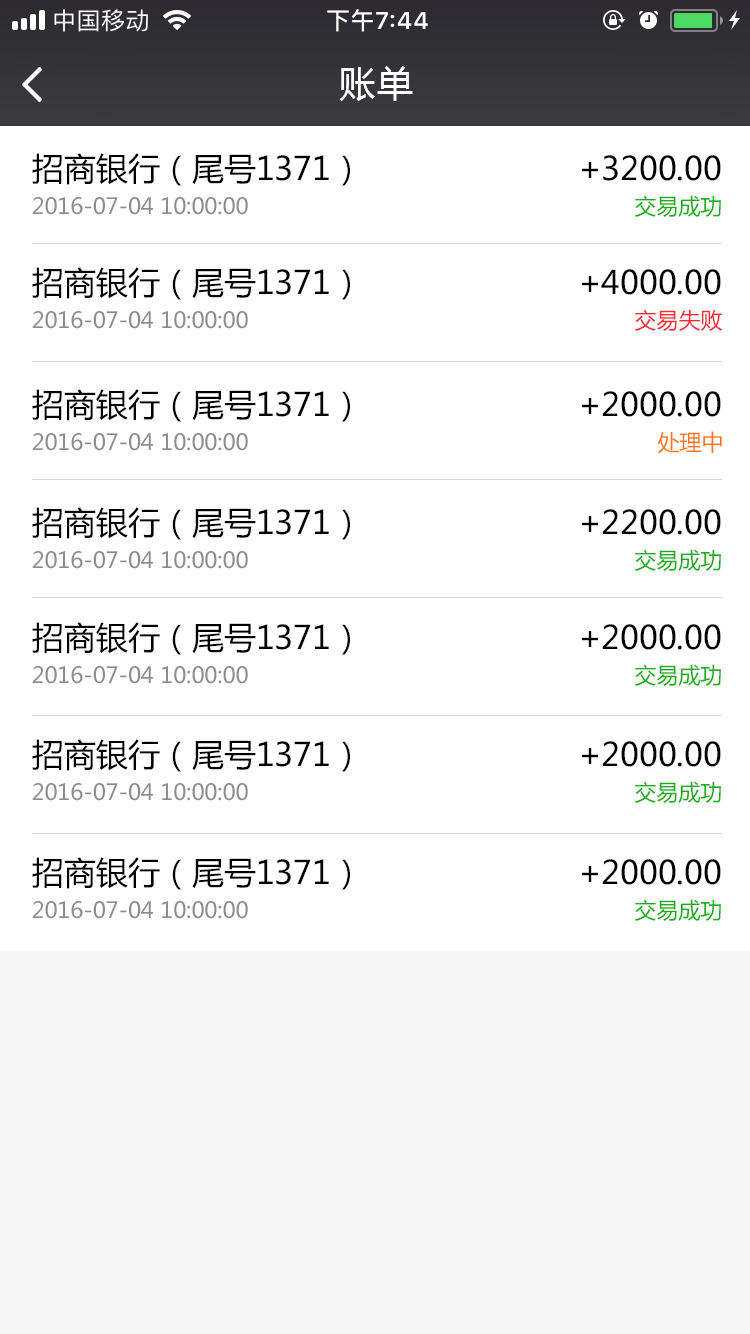
<style>
.page{position:relative;width:750px;height:1334px;background:#ffffff}
.page>*{position:absolute;margin:0}
.t1{font:36px "MicrosoftYaHei";letter-spacing:0.08em;color:#ffffff}
.t2{font:32px "MicrosoftYaHei";color:#000000}
.t3{font:22px "MicrosoftYaHei";color:#8d8d8d}
.t4{font:22px "MicrosoftYaHei";color:#1aad19}
.t5{font:22px "MicrosoftYaHei";color:#f92933}
.t6{font:22px "MicrosoftYaHei";color:#fe7301}
</style>
<div class="page">
<p class="t1" style="left:339px;top:66px;width:74px;height:35px">账单</p>
<p class="t2" style="left:32px;top:153px;width:318px;height:33px">招商银行（尾号1371）</p>
<p class="t2" style="left:582px;top:155px;width:139px;height:26px">+3200.00</p>
<p class="t3" style="left:32px;top:197px;width:216px;height:18px">2016-07-04 10:00:00</p>
<p class="t4" style="left:635px;top:195px;width:86px;height:22px">交易成功</p>
<p class="t2" style="left:32px;top:267px;width:318px;height:33px">招商银行（尾号1371）</p>
<p class="t2" style="left:582px;top:269px;width:139px;height:26px">+4000.00</p>
<p class="t3" style="left:32px;top:311px;width:216px;height:18px">2016-07-04 10:00:00</p>
<p class="t5" style="left:635px;top:309px;width:88px;height:22px">交易失败</p>
<p class="t2" style="left:32px;top:389px;width:318px;height:33px">招商银行（尾号1371）</p>
<p class="t2" style="left:582px;top:391px;width:139px;height:26px">+2000.00</p>
<p class="t3" style="left:32px;top:433px;width:216px;height:18px">2016-07-04 10:00:00</p>
<p class="t6" style="left:657px;top:431px;width:65px;height:23px">处理中</p>
<p class="t2" style="left:32px;top:507px;width:318px;height:33px">招商银行（尾号1371）</p>
<p class="t2" style="left:582px;top:509px;width:139px;height:26px">+2200.00</p>
<p class="t3" style="left:32px;top:551px;width:216px;height:18px">2016-07-04 10:00:00</p>
<p class="t4" style="left:635px;top:549px;width:86px;height:22px">交易成功</p>
<p class="t2" style="left:32px;top:622px;width:318px;height:33px">招商银行（尾号1371）</p>
<p class="t2" style="left:582px;top:624px;width:139px;height:26px">+2000.00</p>
<p class="t4" style="left:635px;top:664px;width:86px;height:22px">交易成功</p>
<p class="t3" style="left:32px;top:666px;width:216px;height:18px">2016-07-04 10:00:00</p>
<p class="t2" style="left:32px;top:739px;width:318px;height:33px">招商银行（尾号1371）</p>
<p class="t2" style="left:582px;top:741px;width:139px;height:26px">+2000.00</p>
<p class="t3" style="left:32px;top:783px;width:216px;height:18px">2016-07-04 10:00:00</p>
<p class="t4" style="left:635px;top:781px;width:86px;height:22px">交易成功</p>
<p class="t2" style="left:32px;top:857px;width:318px;height:33px">招商银行（尾号1371）</p>
<p class="t2" style="left:582px;top:859px;width:139px;height:26px">+2000.00</p>
<p class="t3" style="left:32px;top:901px;width:216px;height:18px">2016-07-04 10:00:00</p>
<p class="t4" style="left:635px;top:899px;width:86px;height:22px">交易成功</p>
</div>
